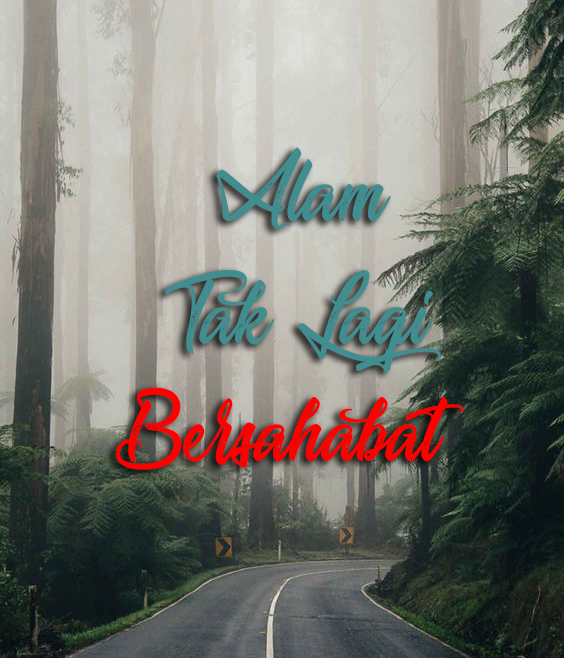
<style>
.page{position:relative;width:564px;height:658px}
.page>*{position:absolute;margin:0}
.t1{font:75px "Journey-to-Thailand";color:#428d90}
.t2{font:75px "Journey-to-Thailand";color:#ff0000}
</style>
<div class="page">
<p class="t1" style="left:216px;top:147px;width:175px;height:83px">Alam</p>
<p class="t1" style="left:165px;top:270px;width:276px;height:103px">Tak Lagi</p>
<p class="t2" style="left:116px;top:387px;width:347px;height:83px">Bersahabat</p>
</div>
